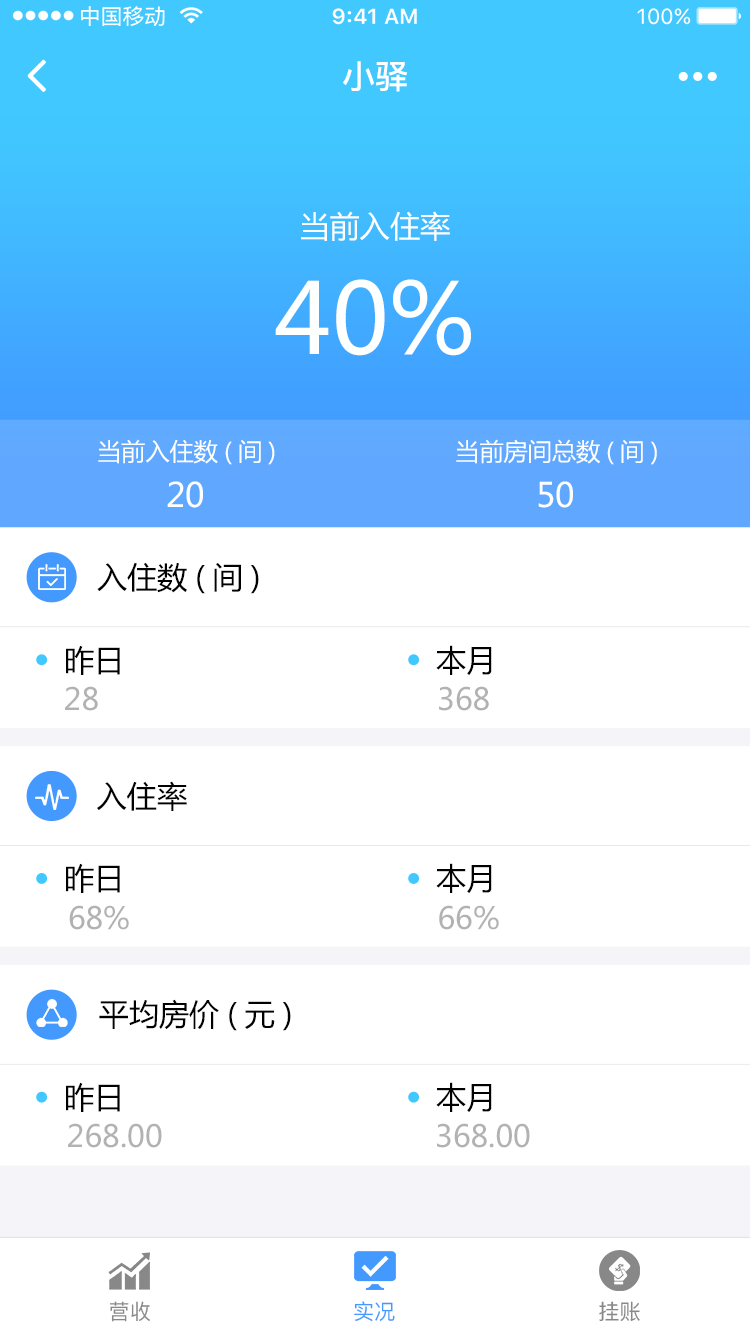
<style>
.page{position:relative;width:750px;height:1334px;background:#ffffff}
.page>*{position:absolute;margin:0}
.t1{font:33.2px "PingFang-SC-Bold";color:#ffffff}
.t2{font:30.2px "MicrosoftYaHei";color:#feffff}
.t3{font:96.7px "MicrosoftYaHei";color:#feffff}
.t4{font:24.2px "MicrosoftYaHei";color:#feffff}
.t5{font:33.2px "MicrosoftYaHei";color:#feffff}
.t6{font:30.2px "MicrosoftYaHei";color:#010101}
.t7{font:30.2px "MicrosoftYaHei";color:#b2b2b2}
.t8{font:21.1px "PingFang-SC-Medium";color:#888888}
.t9{font:21.1px "PingFang-SC-Medium";color:#4499ff}
</style>
<div class="page">
<p class="t1" style="left:343px;top:61px;width:65px;height:31px">小驿</p>
<p class="t2" style="left:301px;top:211px;width:149px;height:30px">当前入住率</p>
<p class="t3" style="left:275px;top:279px;width:196px;height:77px">40%</p>
<p class="t4" style="left:98px;top:439px;width:177px;height:26px">当前入住数(间)</p>
<p class="t4" style="left:456px;top:439px;width:201px;height:26px">当前房间总数(间)</p>
<p class="t5" style="left:167px;top:481px;width:36px;height:27px">20</p>
<p class="t5" style="left:538px;top:481px;width:35px;height:27px">50</p>
<p class="t6" style="left:97px;top:562px;width:162px;height:32px">入住数(间)</p>
<p class="t6" style="left:66px;top:645px;width:54px;height:30px">昨日</p>
<p class="t6" style="left:436px;top:645px;width:56px;height:31px">本月</p>
<p class="t7" style="left:65px;top:686px;width:33px;height:25px">28</p>
<p class="t7" style="left:439px;top:686px;width:50px;height:25px">368</p>
<p class="t6" style="left:97px;top:781px;width:90px;height:30px">入住率</p>
<p class="t6" style="left:66px;top:863px;width:54px;height:30px">昨日</p>
<p class="t6" style="left:436px;top:863px;width:56px;height:31px">本月</p>
<p class="t7" style="left:69px;top:905px;width:60px;height:25px">68%</p>
<p class="t7" style="left:439px;top:905px;width:60px;height:25px">66%</p>
<p class="t6" style="left:99px;top:999px;width:192px;height:32px">平均房价(元)</p>
<p class="t6" style="left:66px;top:1082px;width:54px;height:30px">昨日</p>
<p class="t6" style="left:436px;top:1082px;width:56px;height:31px">本月</p>
<p class="t7" style="left:68px;top:1123px;width:94px;height:25px">268.00</p>
<p class="t7" style="left:437px;top:1123px;width:93px;height:25px">368.00</p>
<p class="t8" style="left:110px;top:1301px;width:41px;height:21px">营收</p>
<p class="t9" style="left:354px;top:1301px;width:41px;height:21px">实况</p>
<p class="t8" style="left:599px;top:1301px;width:41px;height:21px">挂账</p>
</div>
